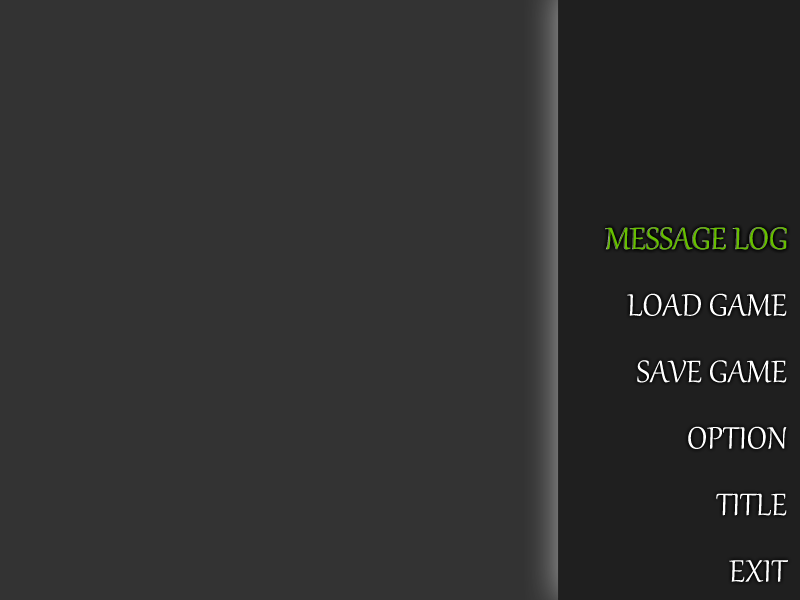
<style>
.page{position:relative;width:800px;height:600px;background:#333333}
.page>*{position:absolute;margin:0}
.t1{font:38px "Gabriola";color:#ffffff}
.t2{font:38px "Gabriola";color:#67bf00}
</style>
<div class="page">
<p class="t1" style="left:605px;top:227px;width:183px;height:355px;text-align:right">MESSAGE LOG<br>LOAD GAME<br>SAVE GAME<br>OPTION<br>TITLE<br>EXIT</p>
<p class="t2" style="left:606px;top:227px;width:181px;height:23px">MESSAGE LOG</p>
</div>
